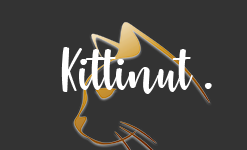
<style>
.page{position:relative;width:247px;height:150px;background:#333333}
.page>*{position:absolute;margin:0}
.t1{font:72.4px "StrawberryBlossom";color:#ffffff}
</style>
<div class="page">
<p class="t1" style="left:61px;top:47px;width:151px;height:47px">Kittinut .</p>
</div>
